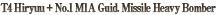
<style>
.page{position:relative;width:216px;height:15px;background:#ffffff}
.page>*{position:absolute;margin:0}
.t1{font:12px "RyuminPro-ExBold";letter-spacing:-0.09em;color:#4a3f32;font-weight:bold;scale:0.8 1}
</style>
<div class="page">
<p class="t1" style="left:0px;top:3px;width:216px;height:12px">T4 Hiryuu + No.1 M1A Guid. Missile Heavy Bomber</p>
</div>
